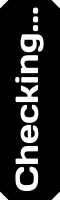
<style>
.page{position:relative;width:60px;height:200px;background:#000000}
.page>*{position:absolute;margin:0}
.t1{font:32px "DaysOne-Regular";color:#ffffff}
</style>
<div class="page">
<p class="t1" style="left:15px;top:7px;width:29px;height:185px;rotate:-90deg">Checking...</p>
</div>
